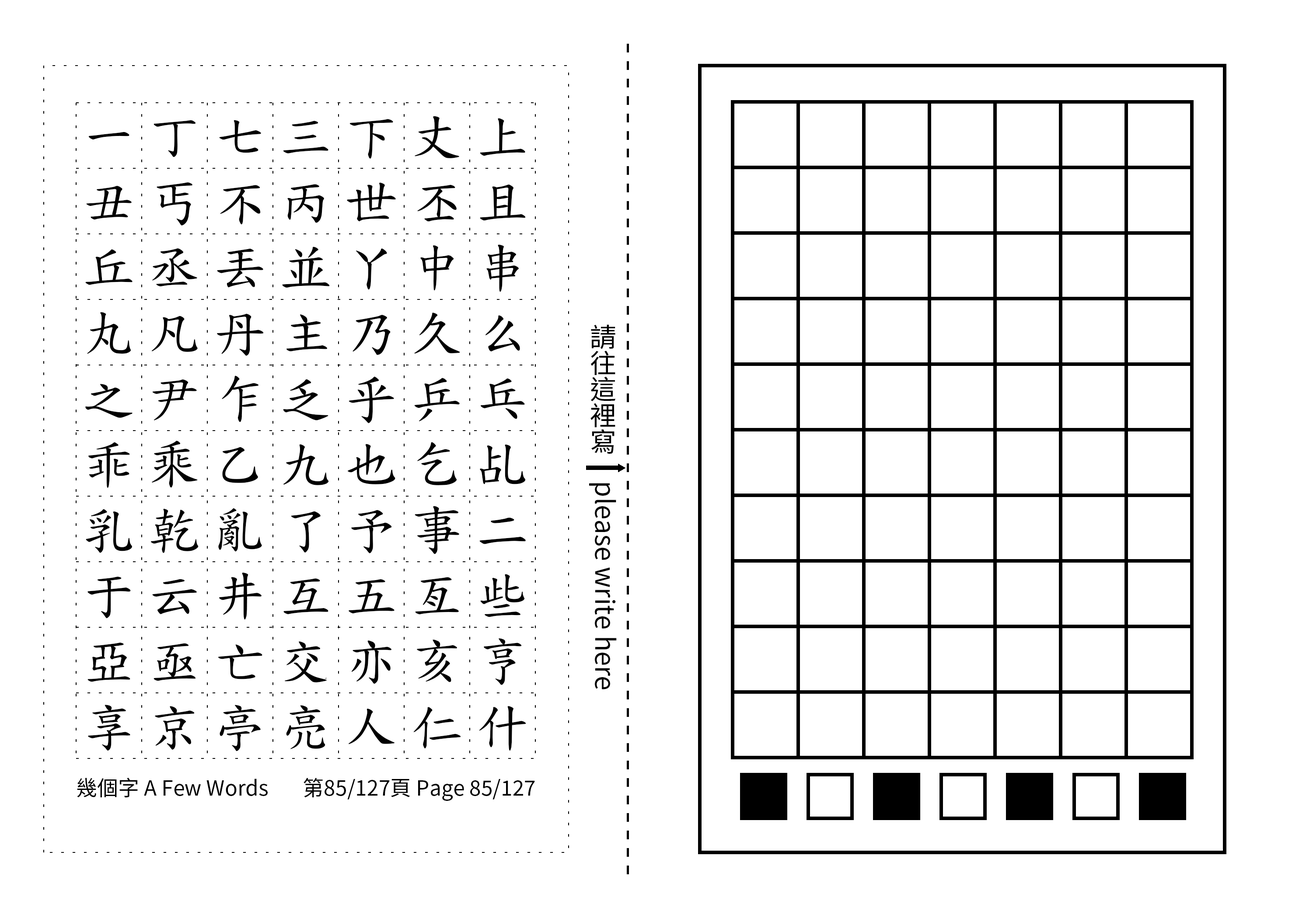
<style>
.page{position:relative;width:1299px;height:918px;background:#ffffff}
.page>*{position:absolute;margin:0}
.t1{font:52.5px/65.6px "TW-Kai-98_1";letter-spacing:0.25em;color:#000000}
.t2{font:26.2px "SourceHanSansTC-Regular";color:#000000}
.t3{font:21px "SourceHanSansTC-Regular";color:#000000}
</style>
<div class="page">
<p class="t1" style="left:85px;top:116px;width:441px;height:636px;text-align:center">一丁七三下丈上丑丐不丙世丕且丘丞丟並丫中串丸凡丹主乃久么之尹乍乏乎乒乓乖乘乙九也乞乩乳乾亂了予事二于云井互五亙些亞亟亡交亦亥亨享京亭亮人仁什</p>
<p class="t2" style="left:589px;top:324px;width:28px;height:366px;text-align:center">請往這裡寫　please write here</p>
<p class="t3" style="left:77px;top:778px;width:191px;height:20px">幾個字 A Few Words</p>
<p class="t3" style="left:303px;top:778px;width:232px;height:23px">第85/127頁 Page 85/127</p>
</div>
